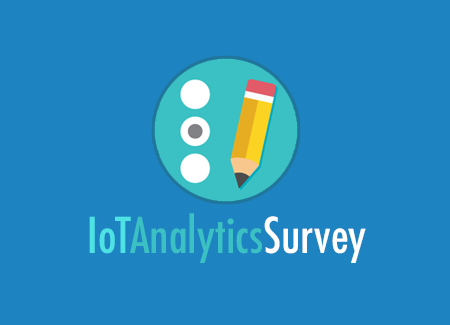
<style>
.page{position:relative;width:450px;height:325px;background:#1d83c1}
.page>*{position:absolute;margin:0}
.t1{font:48px "Futura-CondensedMedium";color:#3bc1c3}
.t2{font:48px "Futura-CondensedMedium";color:#4fe2e4}
.t3{font:48px "Futura-CondensedMedium";color:#ffffff}
</style>
<div class="page">
<p class="t1" style="left:89px;top:213px;width:277px;height:50px"><span class="t2">IoT</span>Analytics<span class="t3">Survey</span></p>
</div>
